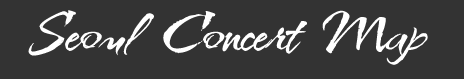
<style>
.page{position:relative;width:464px;height:79px;background:#333333}
.page>*{position:absolute;margin:0}
.t1{font:72.7px "KolkerBrushROB";color:#ffffff}
</style>
<div class="page">
<p class="t1" style="left:28px;top:10px;width:400px;height:55px">Seoul  Concert  Map</p>
</div>
